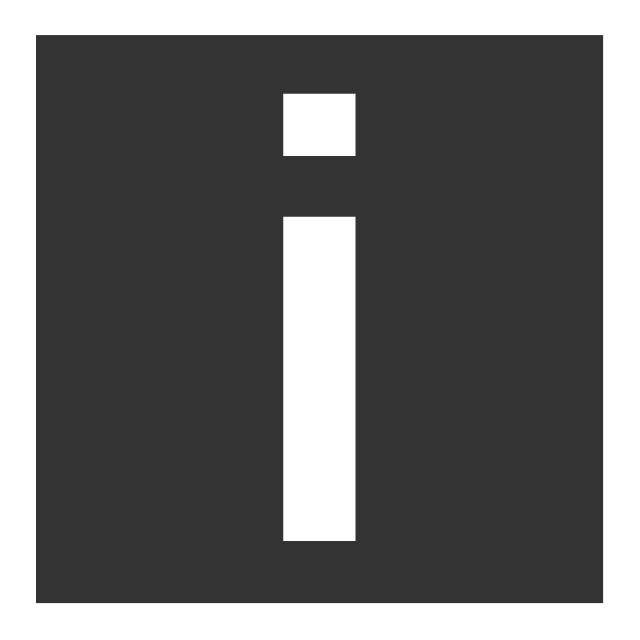
<style>
.page{position:relative;width:640px;height:640px;background:#333333}
.page>*{position:absolute;margin:0}
.t1{font:623.9px "ArialMT";color:#ffffff;scale:1.31 1}
</style>
<div class="page">
<p class="t1" style="left:283px;top:93px;width:73px;height:448px">i</p>
</div>
